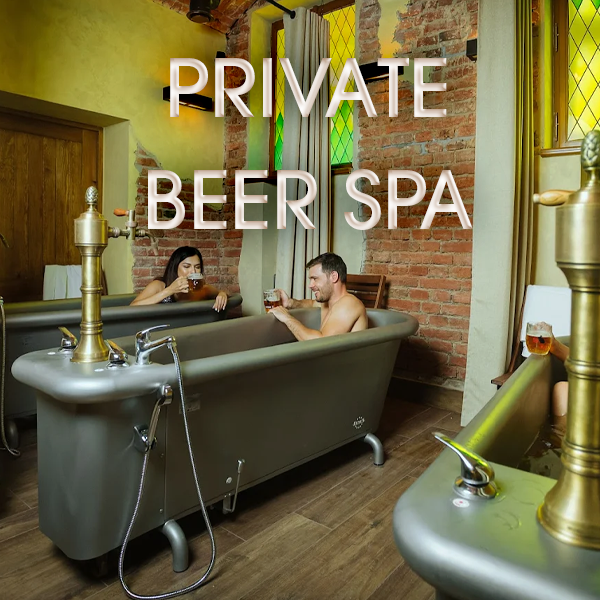
<style>
.page{position:relative;width:600px;height:600px}
.page>*{position:absolute;margin:0}
.t1{font:79.9px/112px "ITCAvantGardePro-Md";text-transform:uppercase}
</style>
<div class="page">
<p class="t1" style="left:148px;top:58px;width:325px;height:172px;text-align:center">PRIVATE<br>BEER SPA</p>
</div>
